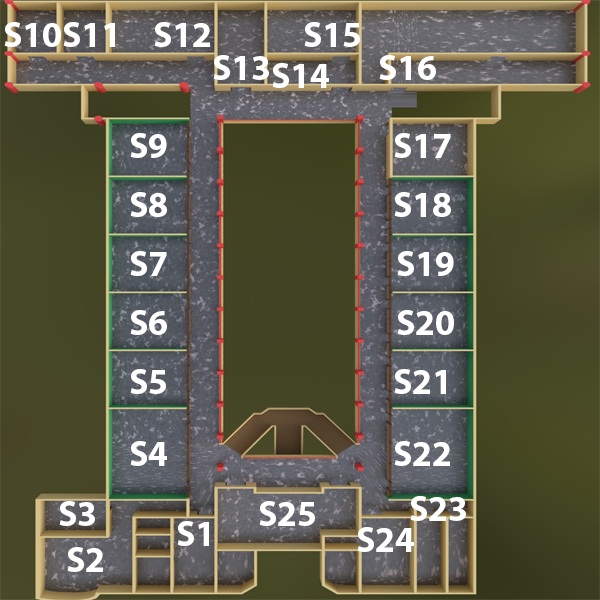
<style>
.page{position:relative;width:600px;height:600px}
.page>*{position:absolute;margin:0}
.t1{font:36px "MyriadPro-Bold";color:#ffffff}
</style>
<div class="page">
<p class="t1" style="left:4px;top:22px;width:57px;height:25px">S10</p>
<p class="t1" style="left:63px;top:22px;width:52px;height:25px">S11</p>
<p class="t1" style="left:154px;top:22px;width:56px;height:25px">S12</p>
<p class="t1" style="left:304px;top:22px;width:56px;height:25px">S15</p>
<p class="t1" style="left:213px;top:55px;width:56px;height:25px">S13</p>
<p class="t1" style="left:272px;top:63px;width:57px;height:25px">S14</p>
<p class="t1" style="left:379px;top:55px;width:57px;height:25px">S16</p>
<p class="t1" style="left:130px;top:133px;width:37px;height:25px">S9</p>
<p class="t1" style="left:394px;top:133px;width:57px;height:25px">S17</p>
<p class="t1" style="left:130px;top:192px;width:37px;height:25px">S8</p>
<p class="t1" style="left:394px;top:192px;width:57px;height:25px">S18</p>
<p class="t1" style="left:130px;top:251px;width:37px;height:25px">S7</p>
<p class="t1" style="left:397px;top:251px;width:57px;height:25px">S19</p>
<p class="t1" style="left:130px;top:310px;width:37px;height:25px">S6</p>
<p class="t1" style="left:397px;top:310px;width:57px;height:25px">S20</p>
<p class="t1" style="left:130px;top:369px;width:36px;height:25px">S5</p>
<p class="t1" style="left:394px;top:369px;width:52px;height:25px">S21</p>
<p class="t1" style="left:130px;top:441px;width:37px;height:25px">S4</p>
<p class="t1" style="left:394px;top:441px;width:56px;height:25px">S22</p>
<p class="t1" style="left:410px;top:496px;width:56px;height:25px">S23</p>
<p class="t1" style="left:59px;top:501px;width:36px;height:25px">S3</p>
<p class="t1" style="left:259px;top:501px;width:56px;height:25px">S25</p>
<p class="t1" style="left:177px;top:521px;width:32px;height:25px">S1</p>
<p class="t1" style="left:357px;top:527px;width:57px;height:25px">S24</p>
<p class="t1" style="left:67px;top:547px;width:36px;height:25px">S2</p>
</div>
